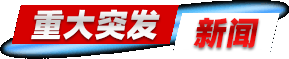
<style>
.page{position:relative;width:289px;height:59px;background:#ffffff}
.page>*{position:absolute;margin:0}
.t1{font:32px "AlibabaPuHuiTi_3_115_Black";color:#ffffff;font-style:italic}
.t2{font:32px "AlibabaPuHuiTi_3_115_Black";font-style:italic}
</style>
<div class="page">
<p class="t1" style="left:31px;top:9px;width:129px;height:31px">重大突发</p>
<p class="t2" style="left:193px;top:17px;width:66px;height:31px">新闻</p>
</div>
